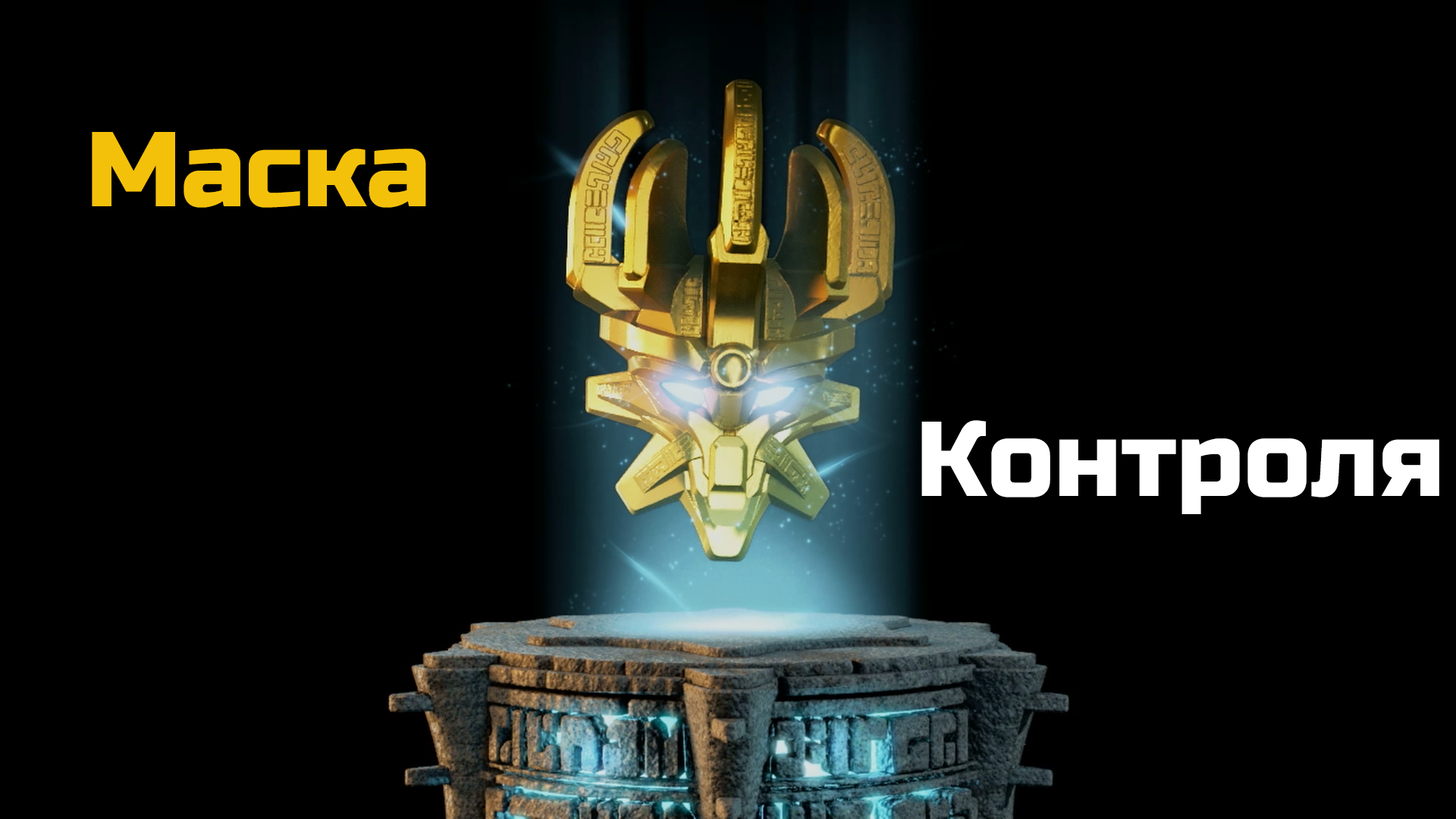
<style>
.page{position:relative;width:1456px;height:819px;background:#000000}
.page>*{position:absolute;margin:0}
.t1{font:106.2px "RussoOne-Regular";color:#f4c10a}
.t2{font:106.2px "RussoOne-Regular";color:#ffffff}
</style>
<div class="page">
<p class="t1" style="left:92px;top:132px;width:334px;height:76px">Маска</p>
<p class="t2" style="left:921px;top:420px;width:518px;height:94px">Контроля</p>
</div>
